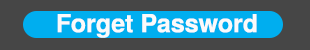
<style>
.page{position:relative;width:310px;height:50px;background:#464646}
.page>*{position:absolute;margin:0}
.t1{font:25px "TeXGyreHeros-Bold";color:#fbfafa}
</style>
<div class="page">
<p class="t1" style="left:57px;top:14px;width:200px;height:24px">Forget Password</p>
</div>
